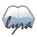
<style>
.page{position:relative;width:37px;height:37px;background:#ffffff}
.page>*{position:absolute;margin:0}
.t1{font:18px "MysticalPlain";color:#424242}
</style>
<div class="page">
<p class="t1" style="left:5px;top:15px;width:28px;height:20px">lyra</p>
</div>
